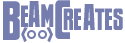
<style>
.page{position:relative;width:125px;height:43px;background:#ffffff}
.page>*{position:absolute;margin:0}
.t1{font:50px "NewsflashBB";color:#757daf}
.t2{font:29.2px "NewsflashBB";color:#757daf}
.t3{font:33.3px "NewsflashBB";color:#757daf}
.t4{font:20.8px "PalookaBB";color:#757daf}
</style>
<div class="page">
<p class="t1" style="left:3px;top:1px;width:17px;height:39px">B</p>
<p class="t2" style="left:21px;top:5px;width:7px;height:22px">e</p>
<p class="t3" style="left:28px;top:1px;width:12px;height:26px">A</p>
<p class="t2" style="left:41px;top:4px;width:13px;height:23px">M</p>
<p class="t1" style="left:55px;top:0px;width:15px;height:39px">C</p>
<p class="t3" style="left:83px;top:4px;width:12px;height:26px">A</p>
<p class="t2" style="left:63px;top:8px;width:60px;height:22px">re   tes</p>
<p class="t4" style="left:21px;top:27px;width:32px;height:15px">&lt;    &gt;</p>
</div>
